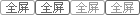
<style>
.page{position:relative;width:140px;height:15px;background:#ffffff}
.page>*{position:absolute;margin:0}
.t1{font:12px "SimSun";color:#666666}
.t2{font:12px "SimSun";color:#999999}
</style>
<div class="page">
<p class="t1" style="left:6px;top:2px;width:23px;height:11px">全屏</p>
<p class="t1" style="left:41px;top:2px;width:23px;height:11px">全屏</p>
<p class="t2" style="left:76px;top:2px;width:23px;height:11px">全屏</p>
<p class="t2" style="left:111px;top:2px;width:23px;height:11px">全屏</p>
</div>
